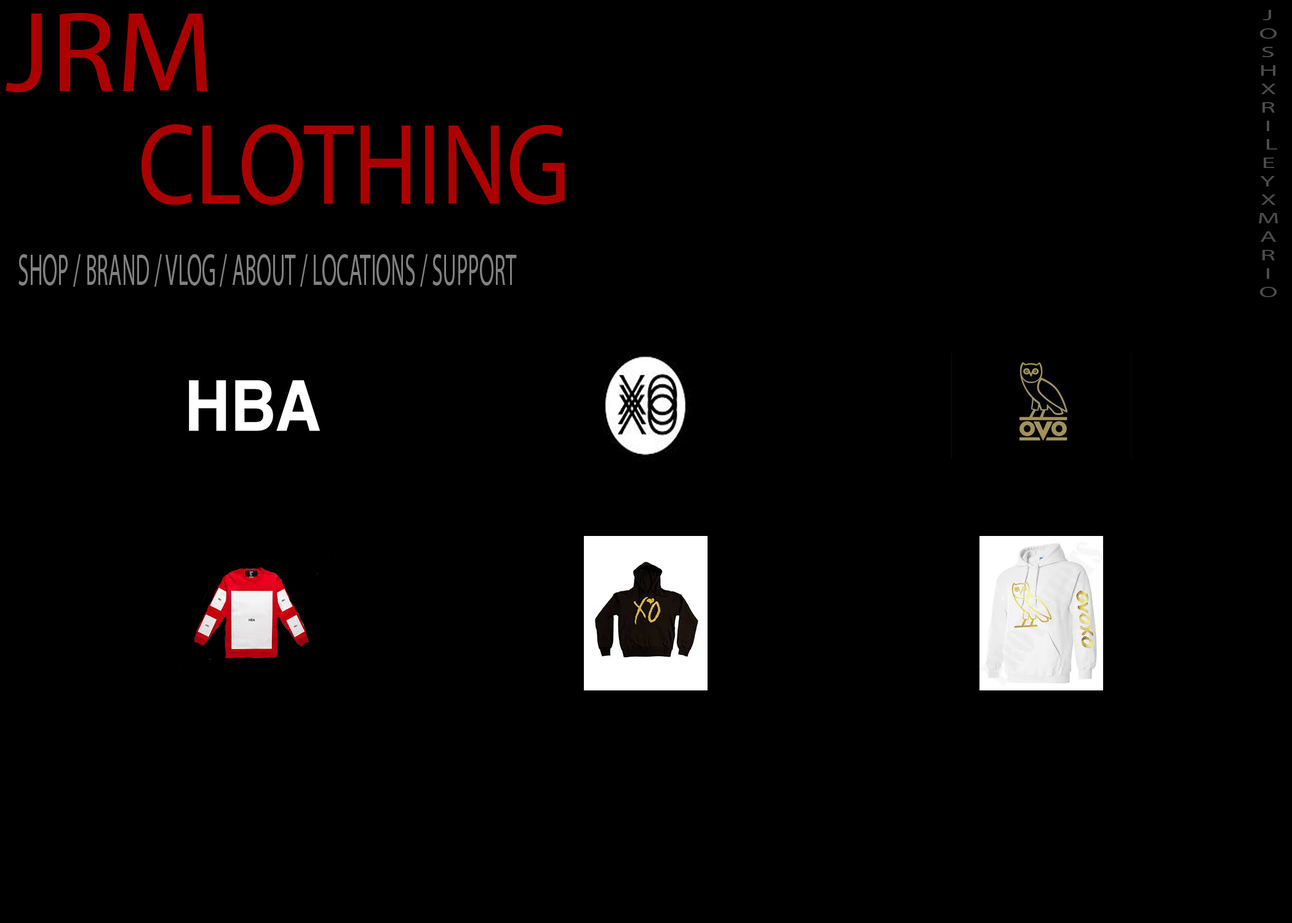
<style>
.page{position:relative;width:1292px;height:923px;background:#000000}
.page>*{position:absolute;margin:0}
.t1{font:15.4px "MyriadPro-Regular";color:#4b4b4b;scale:1.78 1}
.t2{font:10.8px "MyriadPro-Regular";color:#818181;scale:0.48 1}
</style>
<div class="page">
<p class="t1" style="left:1259px;top:10px;width:19px;height:287px;text-align:center">J<br>O<br>S<br> H <br>X<br>R<br>I<br> L<br>E<br> Y <br> X <br>M<br>A<br>R<br>I<br>O</p>
<p class="t2" style="left:18px;top:254px;width:499px;height:33px">SHOP / BRAND / VLOG / ABOUT / LOCATIONS / SUPPORT</p>
</div>
